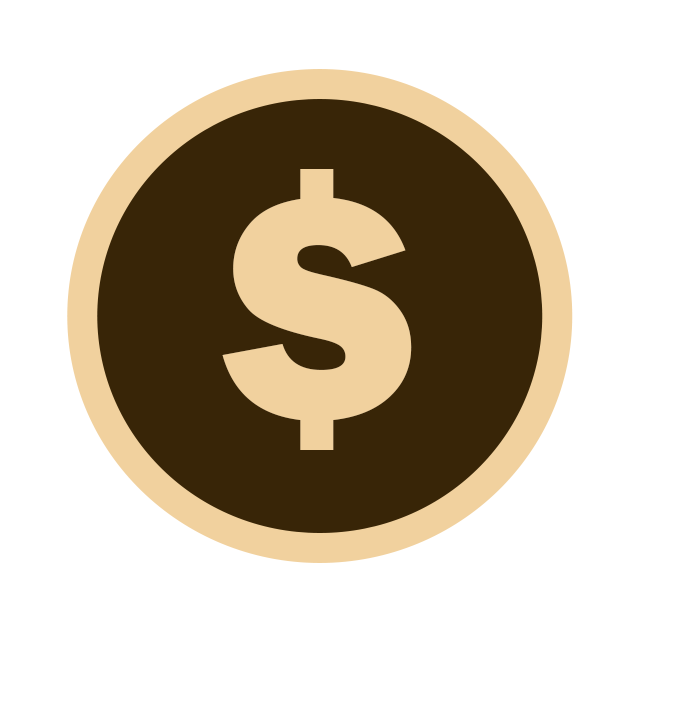
<style>
.page{position:relative;width:673px;height:707px;background:#ffffff}
.page>*{position:absolute;margin:0}
.t1{font:350px "FranklinGothic-Heavy";letter-spacing:0.2em;color:#f1d19e}
</style>
<div class="page">
<p class="t1" style="left:222px;top:169px;width:190px;height:281px">$</p>
</div>
